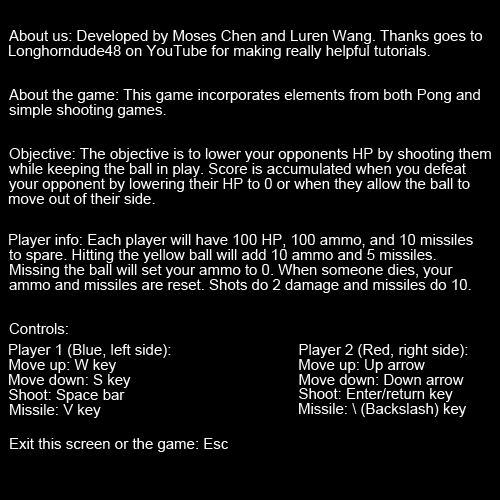
<style>
.page{position:relative;width:500px;height:500px;background:#000000}
.page>*{position:absolute;margin:0}
.t1{font:15px "ArialMT";color:#ffffff}
</style>
<div class="page">
<p class="t1" style="left:9px;top:30px;width:474px;height:14px">About us: Developed by Moses Chen and Luren Wang. Thanks goes to</p>
<p class="t1" style="left:9px;top:45px;width:421px;height:14px">Longhorndude48 on YouTube for making really helpful tutorials.</p>
<p class="t1" style="left:9px;top:89px;width:471px;height:14px">About the game: This game incorporates elements from both Pong and</p>
<p class="t1" style="left:9px;top:104px;width:157px;height:14px">simple shooting games.</p>
<p class="t1" style="left:9px;top:148px;width:482px;height:14px">Objective: The objective is to lower your opponents HP by shooting them</p>
<p class="t1" style="left:9px;top:163px;width:457px;height:14px">while keeping the ball in play. Score is accumulated when you defeat</p>
<p class="t1" style="left:9px;top:178px;width:461px;height:14px">your opponent by lowering their HP to 0 or when they allow the ball to</p>
<p class="t1" style="left:8px;top:193px;width:147px;height:11px">move out of their side.</p>
<p class="t1" style="left:9px;top:234px;width:464px;height:14px">Player info: Each player will have 100 HP, 100 ammo, and 10 missiles</p>
<p class="t1" style="left:9px;top:249px;width:427px;height:14px">to spare. Hitting the yellow ball will add 10 ammo and 5 missiles.</p>
<p class="t1" style="left:10px;top:264px;width:443px;height:14px">Missing the ball will set your ammo to 0. When someone dies, your</p>
<p class="t1" style="left:9px;top:279px;width:462px;height:14px">ammo and missiles are reset. Shots do 2 damage and missiles do 10.</p>
<p class="t1" style="left:9px;top:323px;width:59px;height:11px">Controls:</p>
<p class="t1" style="left:9px;top:344px;width:162px;height:14px">Player 1 (Blue, left side):</p>
<p class="t1" style="left:299px;top:344px;width:169px;height:14px">Player 2 (Red, right side):</p>
<p class="t1" style="left:9px;top:359px;width:107px;height:14px">Move up: W key</p>
<p class="t1" style="left:299px;top:359px;width:126px;height:14px">Move up: Up arrow</p>
<p class="t1" style="left:9px;top:374px;width:122px;height:14px">Move down: S key</p>
<p class="t1" style="left:299px;top:374px;width:165px;height:11px">Move down: Down arrow</p>
<p class="t1" style="left:9px;top:389px;width:116px;height:14px">Shoot: Space bar</p>
<p class="t1" style="left:299px;top:388px;width:154px;height:14px">Shoot: Enter/return key</p>
<p class="t1" style="left:10px;top:404px;width:91px;height:14px">Missile: V key</p>
<p class="t1" style="left:299px;top:403px;width:167px;height:14px">Missile: \ (Backslash) key</p>
<p class="t1" style="left:10px;top:438px;width:218px;height:14px">Exit this screen or the game: Esc</p>
</div>
